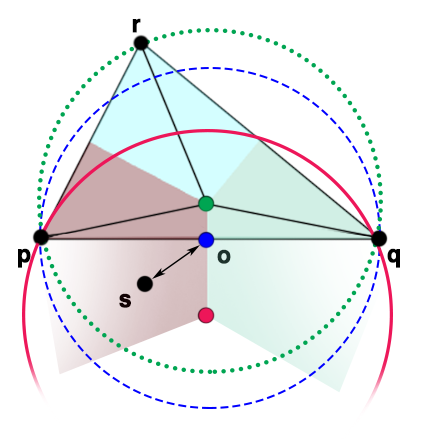
<style>
.page{position:relative;width:422px;height:440px;background:#ffffff}
.page>*{position:absolute;margin:0}
.t1{font:25px "HelveticaCE-Bold";letter-spacing:0.1em;color:#000000;font-weight:bold;scale:0.9 1}
.t2{font:25px "HelveticaCE-Bold";letter-spacing:0.1em;color:#1d322c;font-weight:bold;scale:0.9 1}
</style>
<div class="page">
<p class="t1" style="left:132px;top:18px;width:9px;height:15px">r</p>
<p class="t1" style="left:18px;top:248px;width:13px;height:20px">p</p>
<p class="t2" style="left:217px;top:249px;width:14px;height:15px">o</p>
<p class="t1" style="left:387px;top:248px;width:13px;height:20px">q</p>
<p class="t1" style="left:119px;top:293px;width:12px;height:15px">s</p>
</div>
